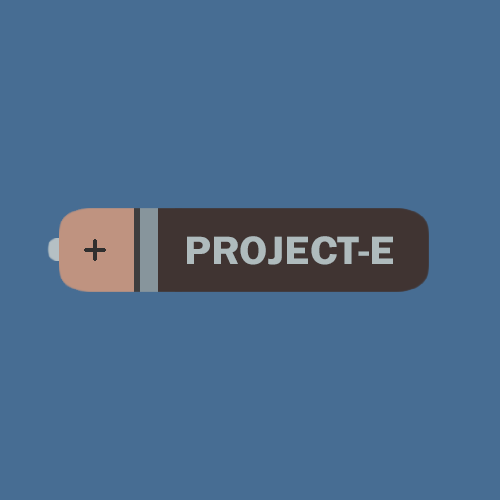
<style>
.page{position:relative;width:500px;height:500px;background:#476d93}
.page>*{position:absolute;margin:0}
.t1{font:41px "FranklinGothic-Demi";color:#afbbbd;scale:1.08 1}
</style>
<div class="page">
<p class="t1" style="left:187px;top:236px;width:206px;height:29px">PROJECT-E</p>
</div>
